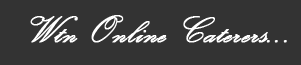
<style>
.page{position:relative;width:301px;height:65px;background:#333333}
.page>*{position:absolute;margin:0}
.t1{font:38.9px "KunstlerScript";color:#ffffff;font-weight:bold;scale:0.96 1}
</style>
<div class="page">
<p class="t1" style="left:30px;top:15px;width:257px;height:28px">Wtn Online Caterers...</p>
</div>
